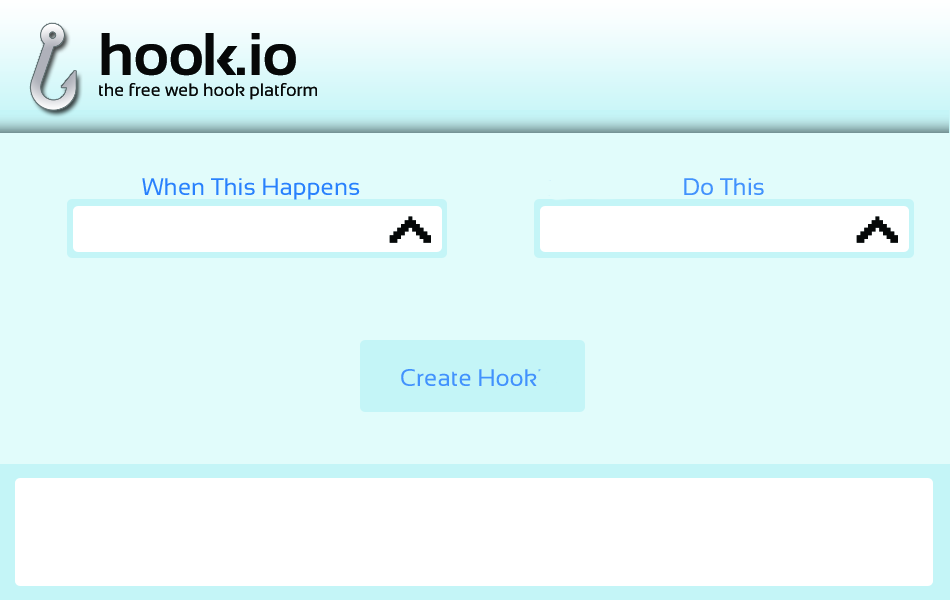
<style>
.page{position:relative;width:950px;height:600px;background:#e1fcfb}
.page>*{position:absolute;margin:0}
.t1{font:18px "Sansation";color:#060808}
.t2{font:60px "Sansation-Bold";color:#060808}
.t3{font:24px "Sansation";color:#2981fd}
.t4{font:24px "Sansation";color:#4292fd}
</style>
<div class="page">
<p class="t1" style="left:99px;top:33px;width:218px;height:67px"><span class="t2">hoo   .io<br></span>the free web hook platform</p>
<p class="t3" style="left:142px;top:178px;width:218px;height:22px">When This Happens</p>
<p class="t4" style="left:684px;top:178px;width:80px;height:17px">Do This</p>
<p class="t4" style="left:401px;top:369px;width:136px;height:17px">Create Hook</p>
</div>
